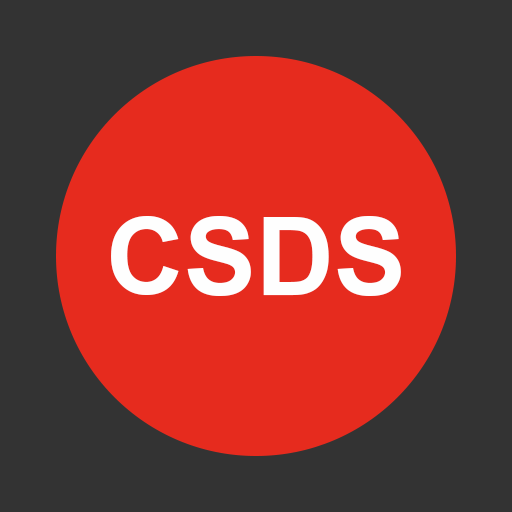
<style>
.page{position:relative;width:512px;height:512px;background:#333333}
.page>*{position:absolute;margin:0}
.t1{font:108px "Arial-BoldMT";color:#fefefe}
</style>
<div class="page">
<p class="t1" style="left:111px;top:216px;width:290px;height:80px">CSDS</p>
</div>
